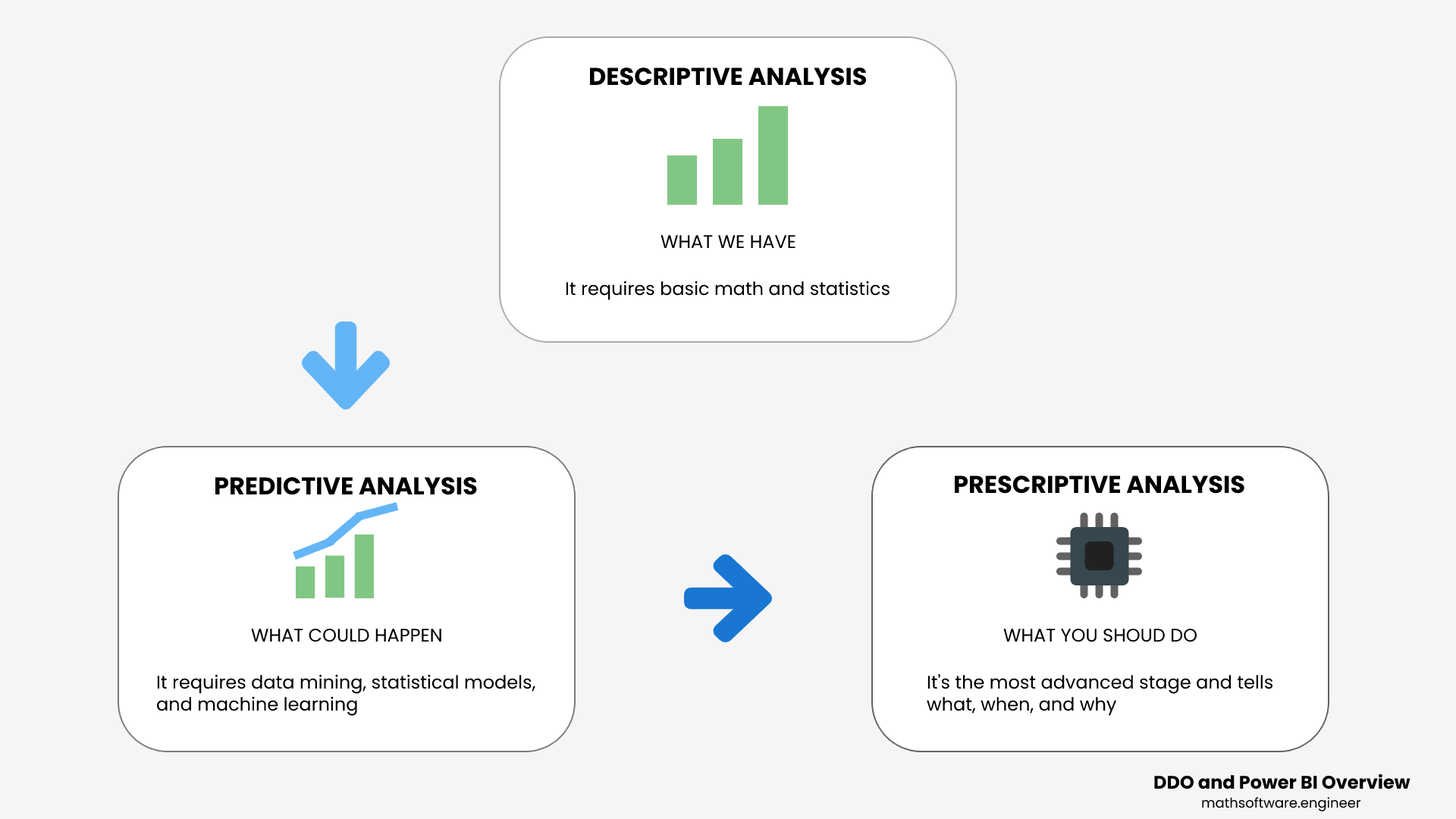
<style>
.page{position:relative;width:1456px;height:819px;background:#f5f5f5}
.page>*{position:absolute;margin:0}
.t1{font:24.3px "Poppins-Bold";color:#000000}
.t2{font:18.2px "Poppins-Regular";color:#000000}
.t3{font:18.2px "Poppins-Bold";color:#000000}
.t4{font:13.6px "Poppins-Regular";color:#000000}
</style>
<div class="page">
<p class="t1" style="left:590px;top:67px;width:276px;height:19px">DESCRIPTIVE ANALYSIS</p>
<p class="t2" style="left:660px;top:235px;width:135px;height:13px">WHAT WE HAVE</p>
<p class="t2" style="left:566px;top:281px;width:324px;height:19px">It requires basic math and statistics</p>
<p class="t1" style="left:215px;top:477px;width:262px;height:18px">PREDICTIVE ANALYSIS</p>
<p class="t1" style="left:955px;top:475px;width:289px;height:19px">PRESCRIPTIVE ANALYSIS</p>
<p class="t2" style="left:251px;top:629px;width:190px;height:13px">WHAT COULD HAPPEN</p>
<p class="t2" style="left:1003px;top:629px;width:194px;height:13px">WHAT YOU SHOUD DO</p>
<p class="t2" style="left:157px;top:674px;width:378px;height:42px">It requires data mining, statistical models,<br>and machine learning</p>
<p class="t2" style="left:927px;top:673px;width:346px;height:43px">It's the most advanced stage and tells<br>what, when, and why</p>
<p class="t3" style="left:1154px;top:773px;width:256px;height:16px">DDO and Power BI Overview</p>
<p class="t4" style="left:1202px;top:797px;width:158px;height:14px">mathsoftware.engineer</p>
</div>
